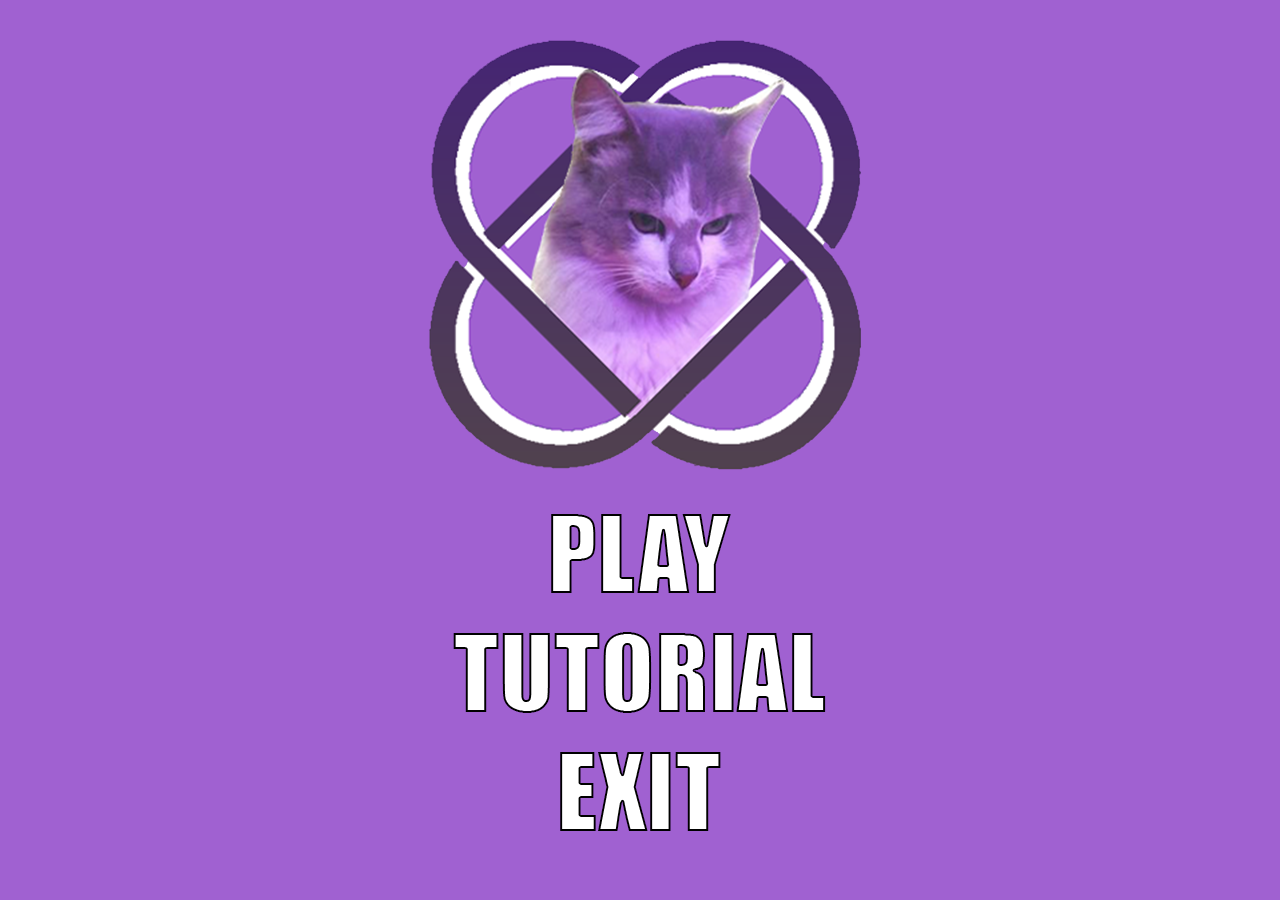
<style>
.page{position:relative;width:1280px;height:900px;background:#a061d1}
.page>*{position:absolute;margin:0}
.t1{font:100px "Impact";color:#ffffff}
</style>
<div class="page">
<p class="t1" style="left:551px;top:514px;width:180px;height:79px">PLAY</p>
<p class="t1" style="left:453px;top:632px;width:373px;height:81px">TUTORIAL</p>
<p class="t1" style="left:560px;top:752px;width:161px;height:79px">EXIT</p>
</div>
